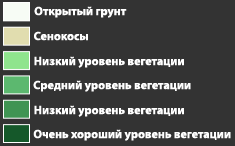
<style>
.page{position:relative;width:235px;height:146px;background:#333333}
.page>*{position:absolute;margin:0}
.t1{font:12px "MyriadPro-Bold";color:#ffffff}
</style>
<div class="page">
<p class="t1" style="left:34px;top:6px;width:93px;height:12px">Открытый грунт</p>
<p class="t1" style="left:34px;top:31px;width:54px;height:10px">Сенокосы</p>
<p class="t1" style="left:34px;top:56px;width:150px;height:12px">Низкий уровень вегетации</p>
<p class="t1" style="left:33px;top:80px;width:158px;height:12px">Средний уровень вегетации</p>
<p class="t1" style="left:34px;top:105px;width:150px;height:12px">Низкий уровень вегетации</p>
<p class="t1" style="left:33px;top:129px;width:198px;height:12px">Очень хороший уровень вегетации</p>
</div>
